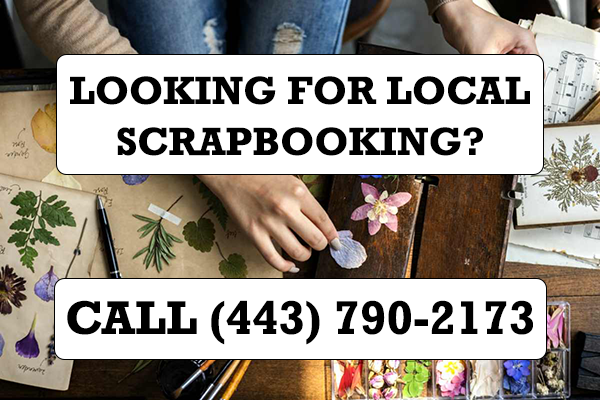
<style>
.page{position:relative;width:600px;height:400px;background:#ffffff}
.page>*{position:absolute;margin:0}
.t1{font:40px "Rockwell-Bold";color:#000000}
.t2{font:48px "Rockwell-Bold";color:#000000}
</style>
<div class="page">
<p class="t1" style="left:70px;top:76px;width:460px;height:29px">LOOKING FOR LOCAL</p>
<p class="t1" style="left:117px;top:127px;width:366px;height:29px">SCRAPBOOKING?</p>
<p class="t2" style="left:67px;top:300px;width:466px;height:45px">CALL (443) 790-2173</p>
</div>
